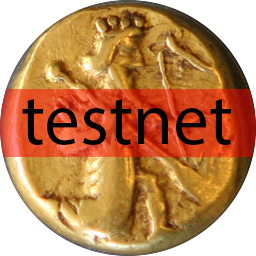
<style>
.page{position:relative;width:256px;height:256px;background:#ffffff}
.page>*{position:absolute;margin:0}
.t1{font:72px "MyriadPro-Regular";color:#000000}
</style>
<div class="page">
<p class="t1" style="left:22px;top:99px;width:209px;height:46px">testnet</p>
</div>
